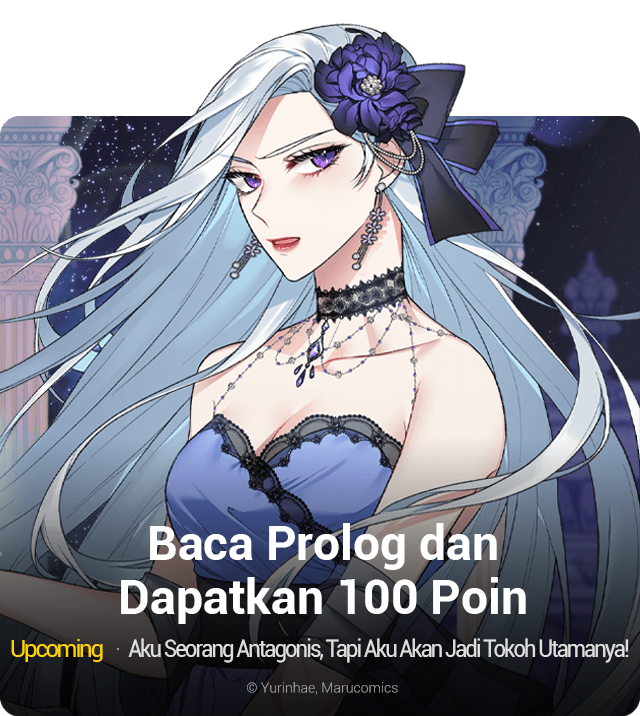
<style>
.page{position:relative;width:640px;height:716px}
.page>*{position:absolute;margin:0}
.t1{font:48px/54px "Roboto-Bold";color:#ffffff}
.t2{font:24px "Roboto-Regular";letter-spacing:-0.1em;color:#ffd201}
.t3{font:24px "Roboto-Regular";letter-spacing:-0.08em;color:#dedede;scale:0.9 1}
.t4{font:14px "Roboto-Light";color:#a8a8a8}
</style>
<div class="page">
<p class="t1" style="left:121px;top:523px;width:405px;height:101px;text-align:center">Baca Prolog dan<br>Dapatkan 100 Poin</p>
<p class="t2" style="left:11px;top:639px;width:92px;height:23px">Upcoming</p>
<p class="t3" style="left:128px;top:638px;width:501px;height:25px">Aku Seorang Antagonis, Tapi Aku Akan Jadi Tokoh Utamanya!</p>
<p class="t4" style="left:247px;top:682px;width:151px;height:13px">© Yurinhae, Marucomics</p>
</div>
